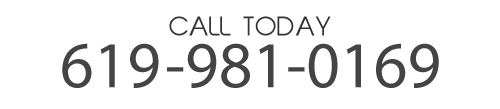
<style>
.page{position:relative;width:500px;height:109px;background:#ffffff}
.page>*{position:absolute;margin:0}
.t1{font:65.7px "MyriadPro-Regular";color:#454444}
.t2{font:65.7px "MyriadPro-Regular";letter-spacing:0.06em;color:#454444}
</style>
<div class="page">
<p class="t1" style="left:62px;top:43px;width:377px;height:45px">61<span class="t2">9</span>-981-0169</p>
</div>
